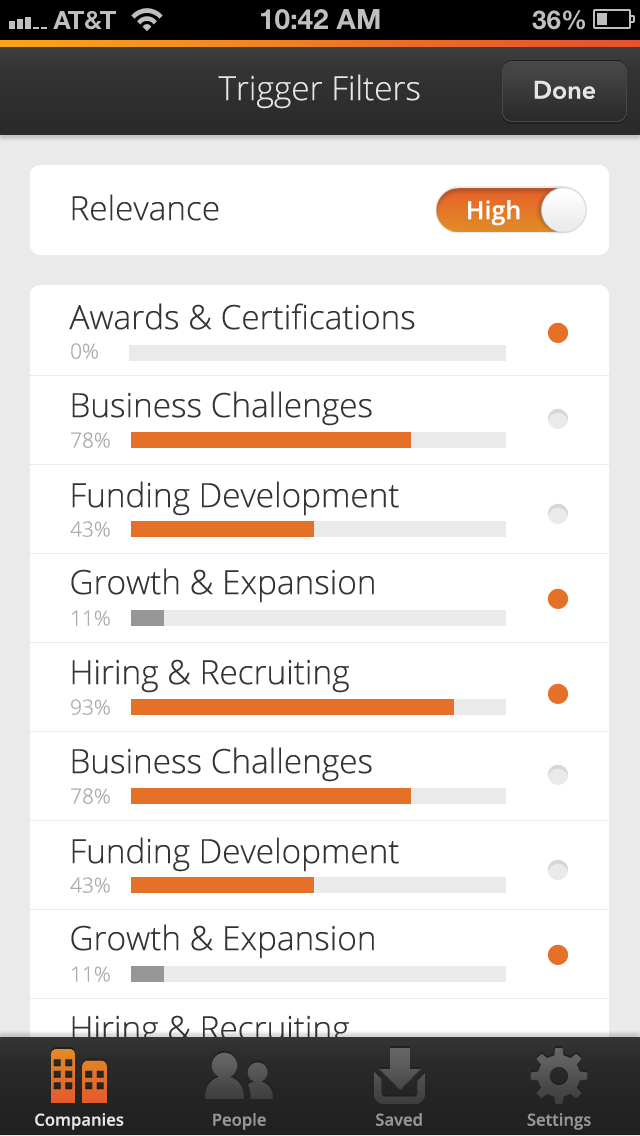
<style>
.page{position:relative;width:640px;height:1136px;background:#ffffff}
.page>*{position:absolute;margin:0}
.t1{font:33.3px "OpenSans-Light";color:#e5e5e5}
.t2{font:25px "AvenirNext-DemiBold";color:#e5e5e5}
.t3{font:33.3px "OpenSans-Light";color:#343434}
.t4{font:25px "OpenSans-Semibold";color:#ffffff}
.t5{font:20.8px "OpenSans-Light";color:#aaaaaa}
.t6{font:16.7px "OpenSans-Semibold";color:#e5e5e5}
.t7{font:16.7px "OpenSans-Semibold";color:#969696}
</style>
<div class="page">
<p class="t1" style="left:218px;top:74px;width:202px;height:35px">Trigger Filters</p>
<p class="t2" style="left:534px;top:80px;width:61px;height:19px">Done</p>
<p class="t3" style="left:72px;top:194px;width:147px;height:27px">Relevance</p>
<p class="t4" style="left:468px;top:200px;width:52px;height:26px">High</p>
<p class="t3" style="left:69px;top:303px;width:346px;height:27px">Awards &amp; Certifications</p>
<p class="t5" style="left:71px;top:343px;width:27px;height:16px">0%</p>
<p class="t3" style="left:72px;top:391px;width:300px;height:35px">Business Challenges</p>
<p class="t5" style="left:71px;top:432px;width:39px;height:16px">78%</p>
<p class="t3" style="left:72px;top:481px;width:327px;height:35px">Funding Development</p>
<p class="t5" style="left:70px;top:521px;width:40px;height:16px">43%</p>
<p class="t3" style="left:71px;top:568px;width:303px;height:35px">Growth &amp; Expansion</p>
<p class="t5" style="left:72px;top:610px;width:38px;height:16px">11%</p>
<p class="t3" style="left:72px;top:659px;width:277px;height:34px">Hiring &amp; Recruiting</p>
<p class="t5" style="left:71px;top:699px;width:39px;height:16px">93%</p>
<p class="t3" style="left:72px;top:747px;width:300px;height:35px">Business Challenges</p>
<p class="t5" style="left:71px;top:788px;width:39px;height:16px">78%</p>
<p class="t3" style="left:72px;top:837px;width:327px;height:35px">Funding Development</p>
<p class="t5" style="left:70px;top:877px;width:40px;height:16px">43%</p>
<p class="t3" style="left:71px;top:924px;width:303px;height:35px">Growth &amp; Expansion</p>
<p class="t5" style="left:72px;top:966px;width:38px;height:16px">11%</p>
<p class="t3" style="left:72px;top:1015px;width:277px;height:34px">Hiring &amp; Recruiting</p>
<p class="t6" style="left:35px;top:1113px;width:89px;height:17px">Companies</p>
<p class="t7" style="left:213px;top:1113px;width:53px;height:17px">People</p>
<p class="t7" style="left:376px;top:1113px;width:46px;height:13px">Saved</p>
<p class="t7" style="left:527px;top:1113px;width:64px;height:17px">Settings</p>
</div>
